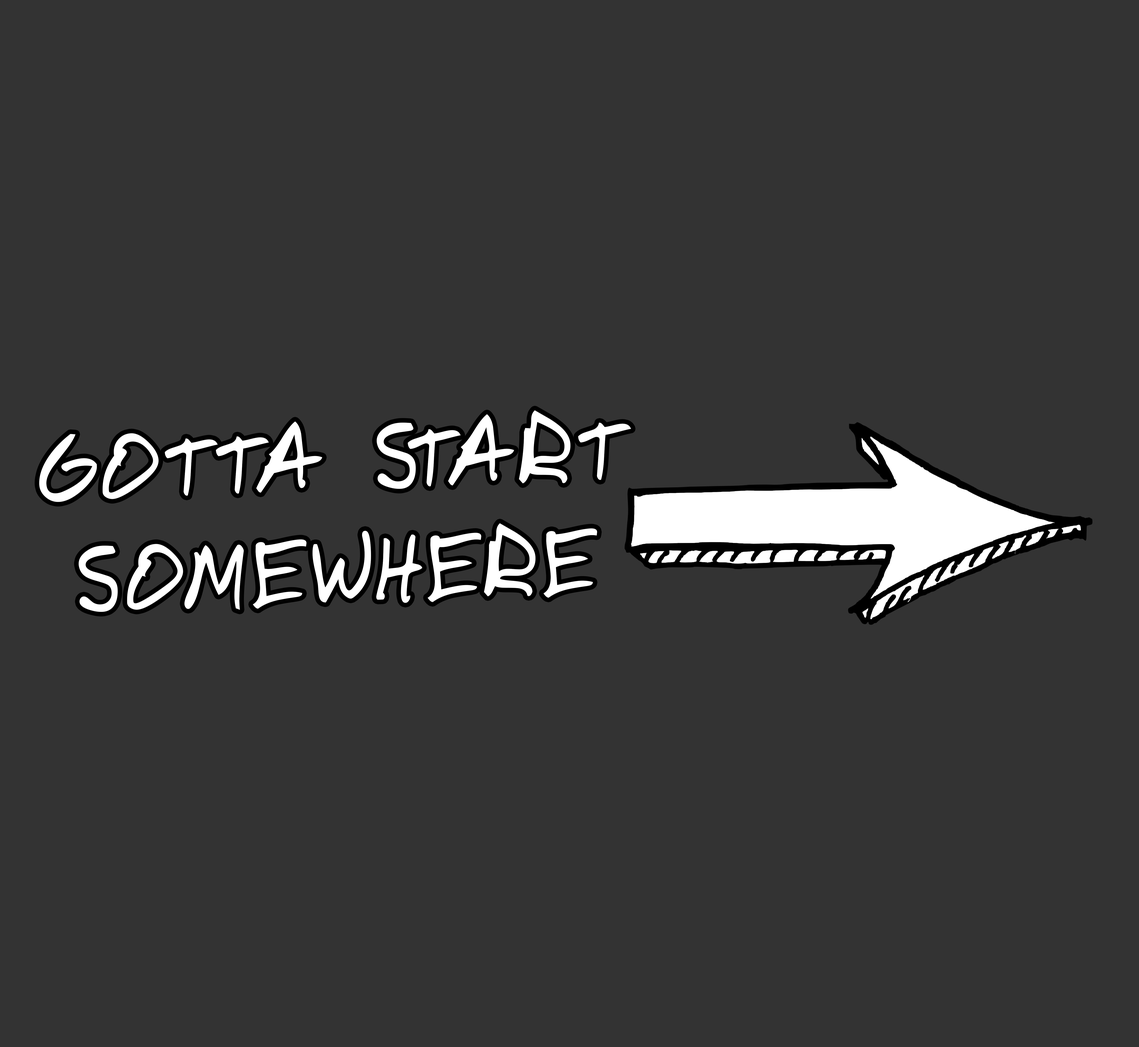
<style>
.page{position:relative;width:1139px;height:1047px;background:#333333}
.page>*{position:absolute;margin:0}
.t1{font:93px "DomesticManners";letter-spacing:0.04em;color:#ffffff}
</style>
<div class="page">
<p class="t1" style="left:39px;top:410px;width:592px;height:202px;text-align:center;rotate:-2deg">GOTTA START<br>SOMEWHERE</p>
</div>
